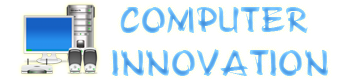
<style>
.page{position:relative;width:348px;height:81px;background:#ffffff}
.page>*{position:absolute;margin:0}
.t1{font:36px "PoloBrush";color:#2f7ccc}
</style>
<div class="page">
<p class="t1" style="left:112px;top:7px;width:216px;height:69px;text-align:center">COMPUTER <br>INNOVATION</p>
</div>
